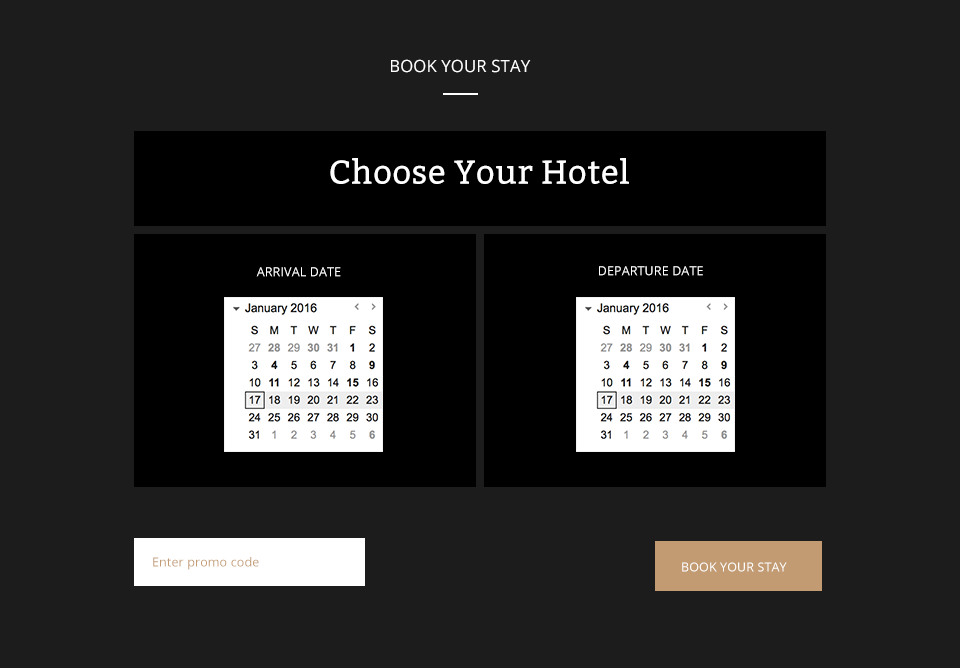
<style>
.page{position:relative;width:960px;height:668px;background:#1c1c1c}
.page>*{position:absolute;margin:0}
.t1{font:16.7px "OpenSans";letter-spacing:0.01em;color:#ffffff}
.t2{font:33.3px "Bitter-Regular";letter-spacing:0.01em;color:#ffffff}
.t3{font:12.5px "OpenSans";letter-spacing:0.01em;color:#ffffff}
.t4{font:12.5px "OpenSans";letter-spacing:0.01em;color:#c29b73}
</style>
<div class="page">
<p class="t1" style="left:391px;top:59px;width:140px;height:14px">BOOK YOUR STAY</p>
<p class="t2" style="left:330px;top:158px;width:299px;height:26px">Choose Your Hotel</p>
<p class="t3" style="left:256px;top:267px;width:85px;height:10px">ARRIVAL DATE</p>
<p class="t3" style="left:599px;top:266px;width:104px;height:10px">DEPARTURE DATE</p>
<p class="t4" style="left:153px;top:557px;width:106px;height:13px">Enter promo code</p>
<p class="t3" style="left:682px;top:562px;width:105px;height:10px">BOOK YOUR STAY</p>
</div>
